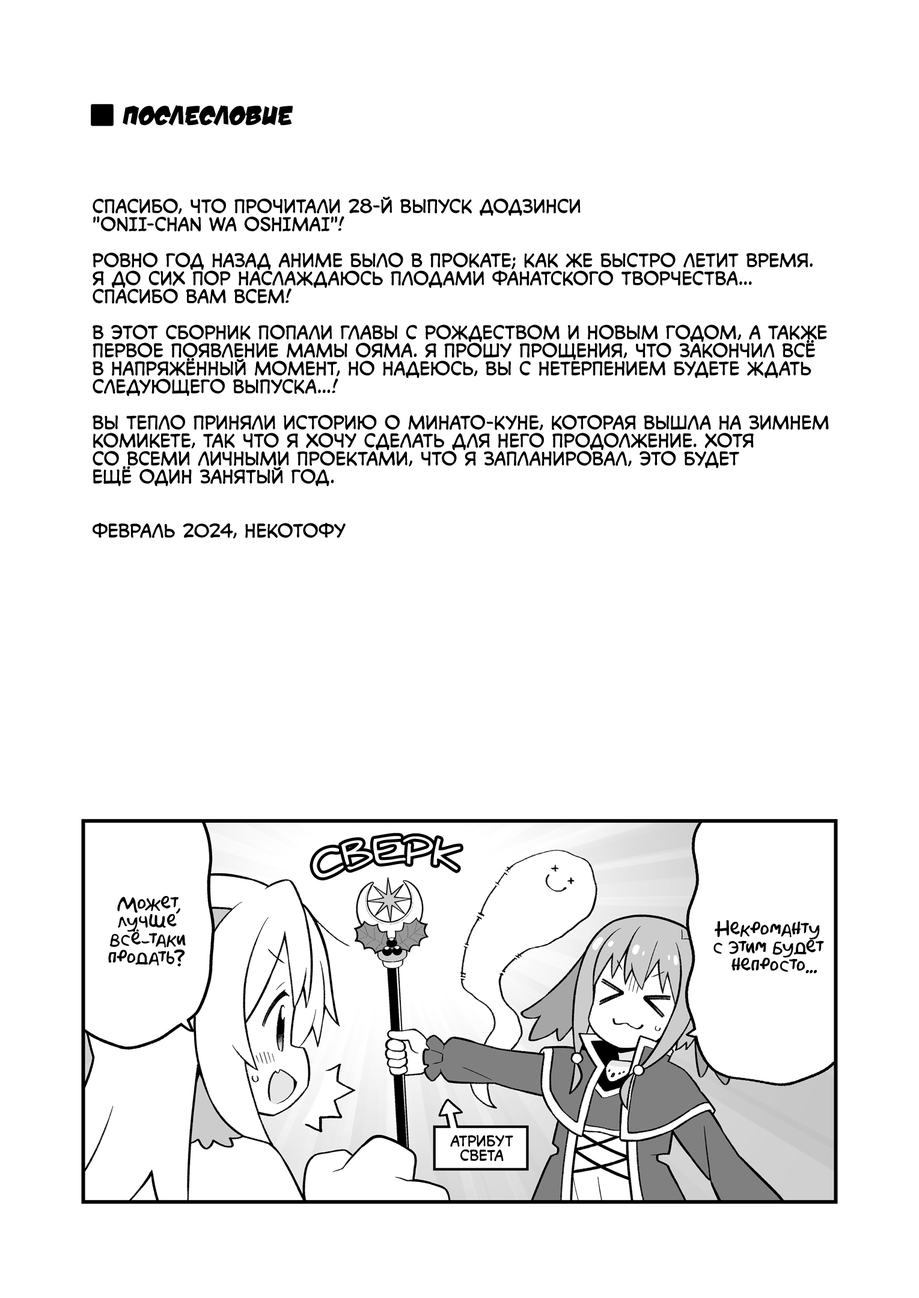
<style>
.page{position:relative;width:919px;height:1298px;background:#ffffff}
.page>*{position:absolute;margin:0}
.t1{font:27px "v_DamnNoisyKids";color:#000000;text-transform:uppercase}
.t2{font:18px "v_CCMonologous";color:#000000;text-transform:uppercase}
.t3{font:36.1px "v_Augie";color:#ffffff;text-transform:uppercase}
.t4{font:18px "AkbarPlain";color:#000000}
.t5{font:14.4px "v_CCMonologous";color:#000000;text-transform:uppercase}
</style>
<div class="page">
<p class="t1" style="left:123px;top:105px;width:170px;height:21px">Послесловие</p>
<p class="t2" style="left:93px;top:196px;width:736px;height:342px">Спасибо, что прочитали 28-й выпуск додзинси<br>"Onii-chan wa Oshimai"!<br><br>Ровно год назад аниме было в прокате; как же быстро летит время.<br>Я до сих пор наслаждаюсь плодами фанатского творчества...<br>Спасибо вам всем!<br><br>В этот сборник попали главы с Рождеством и Новым Годом, а также<br>первое появление мамы Ояма. Я прошу прощения, что закончил всё<br>в напряжённый момент, но надеюсь, вы с нетерпением будете ждать<br>следующего выпуска...!<br><br>Вы тепло приняли историю о Минато-куне, которая вышла на зимнем<br>Комикете, так что я хочу сделать для него продолжение. Хотя<br>со всеми личными проектами, что я запланировал, это будет<br>ещё один занятый год.<br><br><br>Февраль 2024, Некотофу</p>
<p class="t3" style="left:312px;top:836px;width:148px;height:41px;rotate:-4deg">сверк</p>
<p class="t4" style="left:108px;top:896px;width:78px;height:71px;text-align:center">Может,<br>лучше<br>всё-таки<br>продать?</p>
<p class="t4" style="left:713px;top:920px;width:111px;height:53px;text-align:center">Некроманту<br>с этим будет<br>непросто...</p>
<p class="t5" style="left:450px;top:1135px;width:63px;height:26px;text-align:center">Атрибут<br>света</p>
</div>
